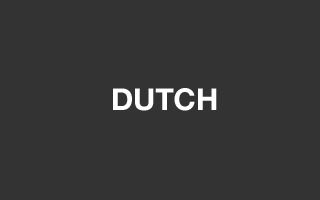
<style>
.page{position:relative;width:320px;height:200px;background:#333333}
.page>*{position:absolute;margin:0}
.t1{font:30px "HelveticaNeue-Bold";color:#ffffff}
</style>
<div class="page">
<p class="t1" style="left:113px;top:88px;width:104px;height:23px">DUTCH</p>
</div>
